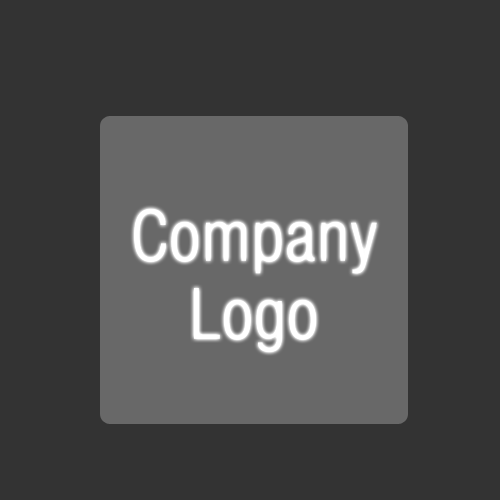
<style>
.page{position:relative;width:500px;height:500px;background:#333333}
.page>*{position:absolute;margin:0}
.t1{font:71px/78px "HelveticaNeueLTStd-LtCn";letter-spacing:0.025em;color:#ffffff}
</style>
<div class="page">
<p class="t1" style="left:134px;top:209px;width:243px;height:143px;text-align:center">Company<br>Logo</p>
</div>
